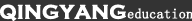
<style>
.page{position:relative;width:192px;height:21px;background:#333333}
.page>*{position:absolute;margin:0}
.t1{font:20px "CopperplateGothic-Bold";color:#ffffff;font-weight:bold}
.t2{font:14px "YouYuan";color:#ffffff;font-weight:bold}
.t3{font:14px "YouYuan";letter-spacing:0.075em;color:#ffffff;font-weight:bold}
</style>
<div class="page">
<p class="t1" style="left:0px;top:4px;width:193px;height:18px">QINGYANG<span class="t2">educatio</span><span class="t3">n</span></p>
</div>
